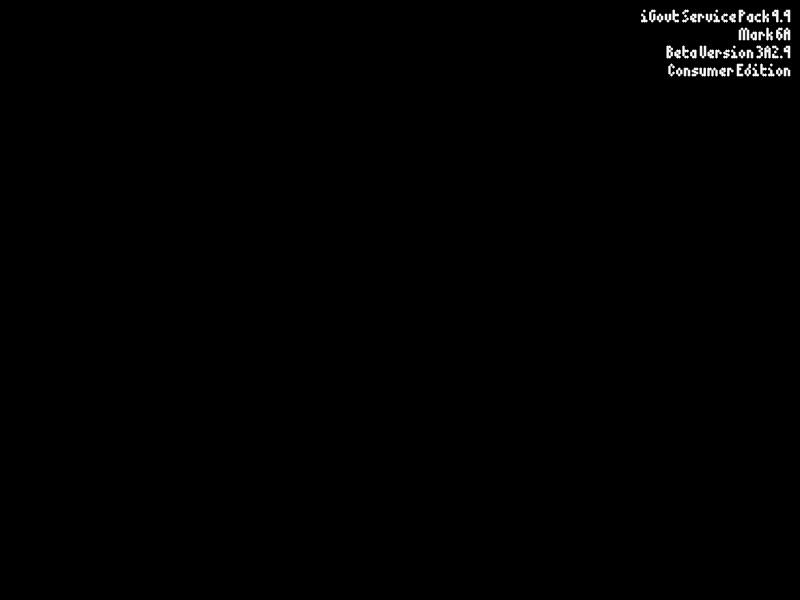
<style>
.page{position:relative;width:800px;height:600px;background:#000000}
.page>*{position:absolute;margin:0}
.t1{font:16px/18px "5Dotmatrix-1979";letter-spacing:-0.01em;color:#ffffff}
</style>
<div class="page">
<p class="t1" style="left:641px;top:9px;width:150px;height:68px;text-align:right">iGovt Service Pack 4.4<br>Mark 6A<br> Beta Version 3A2.4<br>Consumer Edition</p>
</div>
